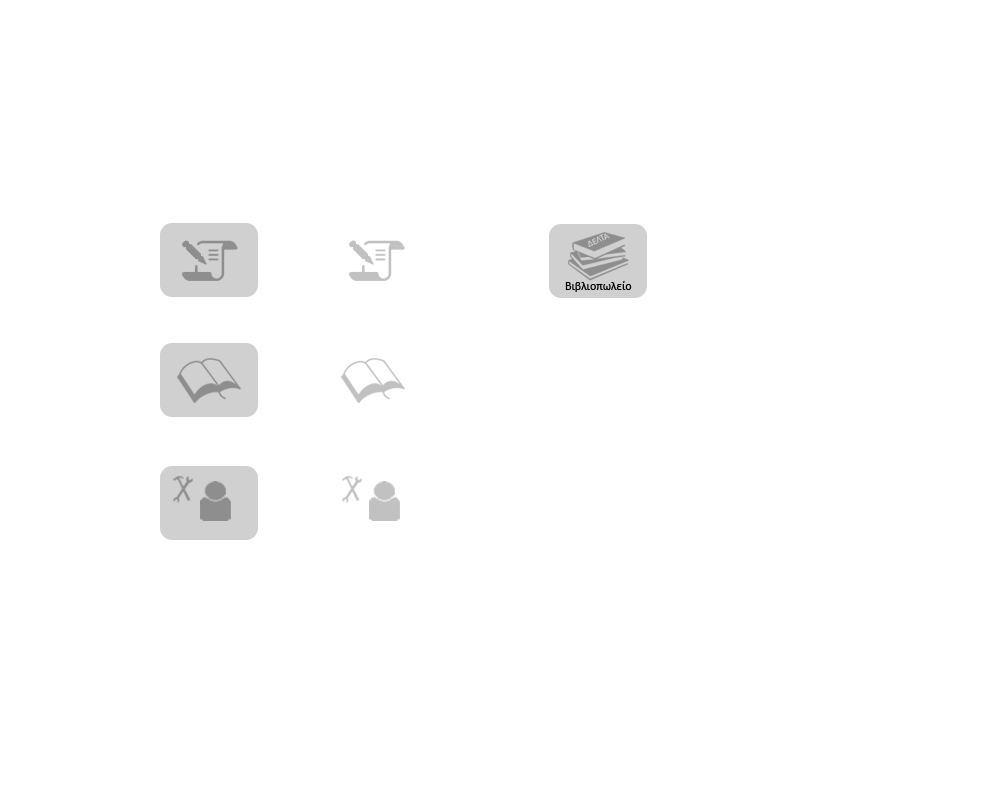
<style>
.page{position:relative;width:1000px;height:800px;background:#ffffff}
.page>*{position:absolute;margin:0}
.t1{font:9px "Calibri";color:#d0d0d0}
.t2{font:12px "Calibri";color:#000000}
</style>
<div class="page">
<p class="t1" style="left:588px;top:233px;width:22px;height:14px;rotate:-26deg">ΔΕΛΤΑ</p>
<p class="t2" style="left:565px;top:281px;width:67px;height:11px">Βιβλιοπωλείο</p>
</div>
